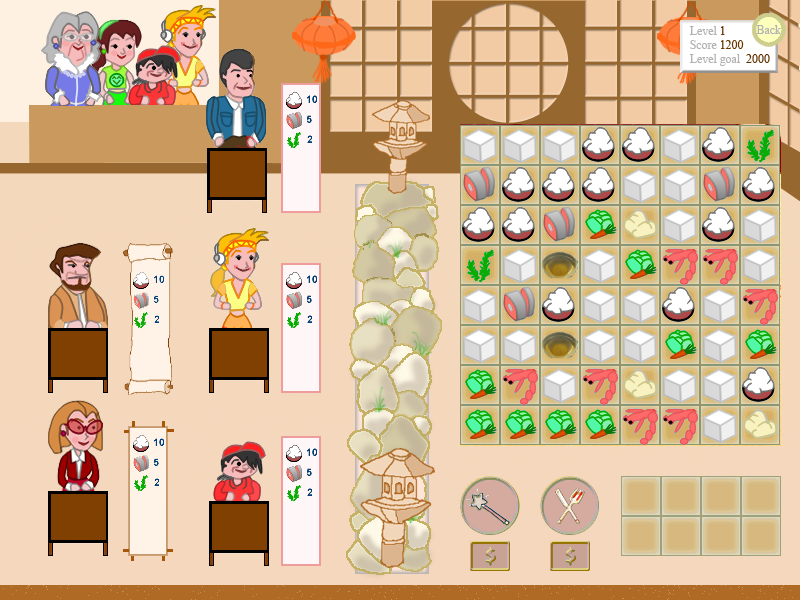
<style>
.page{position:relative;width:800px;height:600px}
.page>*{position:absolute;margin:0}
.t1{font:11.9px "TimesNewRomanPSMT";color:#b3b3b3}
.t2{font:11.9px "TimesNewRomanPSMT";color:#b2b2b2}
.t3{font:11.9px "TimesNewRomanPSMT";color:#633200}
.t4{font:11.9px "TimesNewRomanPSMT";color:#6c3600}
</style>
<div class="page">
<p class="t1" style="left:689px;top:26px;width:81px;height:40px"><span class="t2">Level </span><span class="t3">1<br></span>Score <span class="t4">1200<br></span>Level goal  <span class="t3">2000</span></p>
<p class="t2" style="left:756px;top:25px;width:25px;height:9px">Back</p>
</div>
